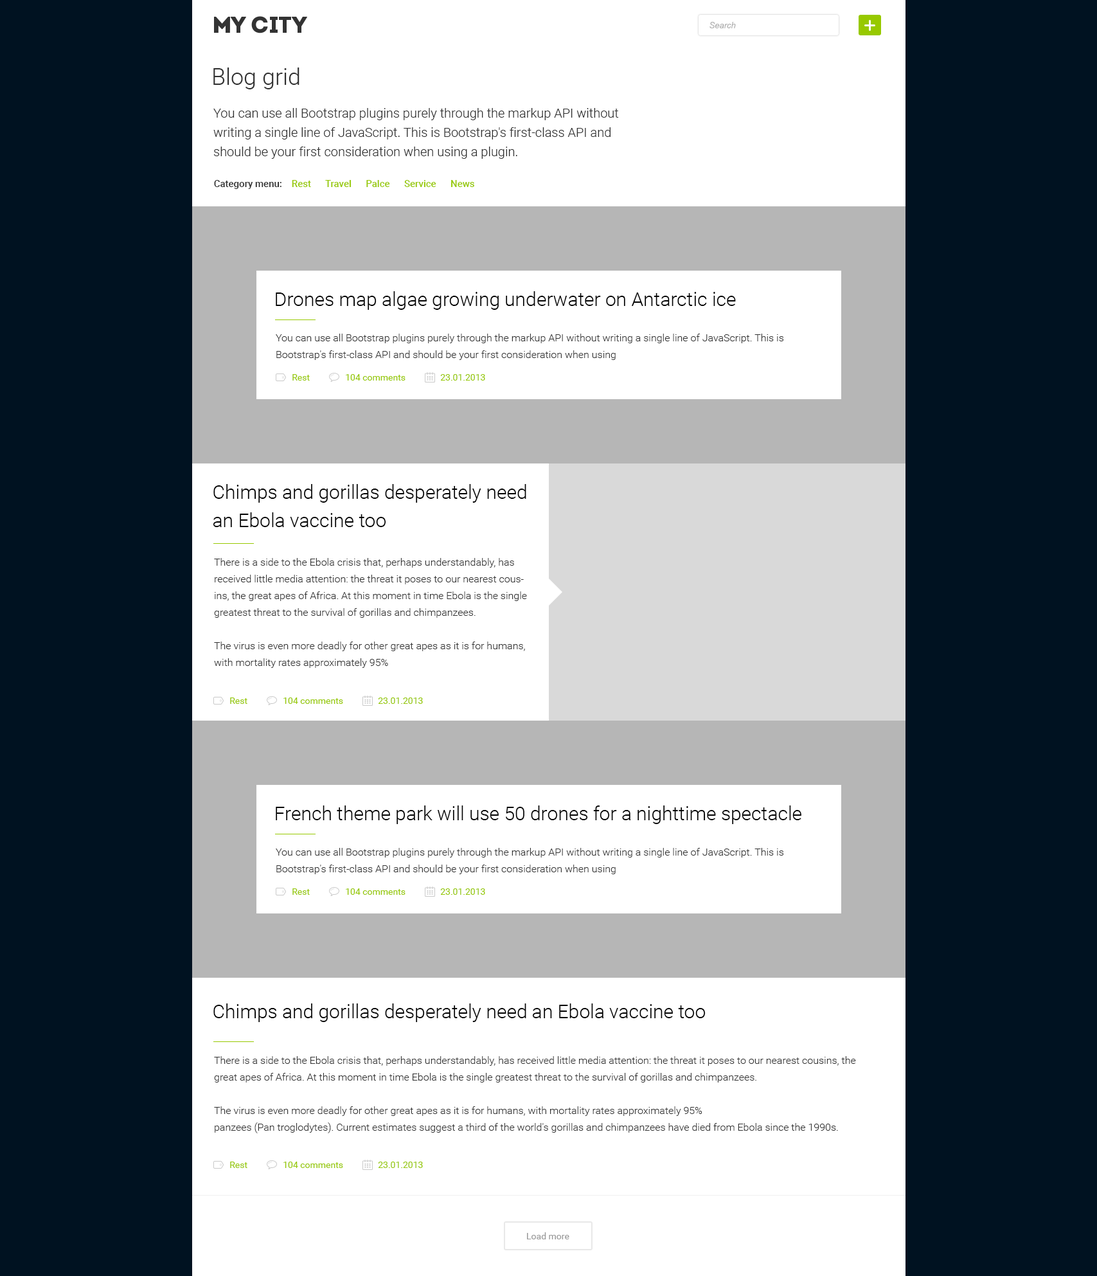
<style>
.page{position:relative;width:1097px;height:1276px;background:#ffffff}
.page>*{position:absolute;margin:0}
.t1{font:8.4px "Arial-ItalicMT";color:#acacac}
.t2{font:23.1px "Roboto-Light";color:#2f2f2f}
.t3{font:12.9px/19.3px "Roboto-Light";color:#2f2f2f}
.t4{font:9.6px "Roboto-Medium";color:#97c900}
.t5{font:9.6px "Roboto-Medium";color:#2f2f2f}
.t6{font:19.3px "Roboto-Light";color:#000000}
.t7{font:10.3px/16.7px "Roboto-Light";color:#333333}
.t8{font:9px "Roboto-Regular";color:#97c900}
.t9{font:19.3px/28.3px "Roboto-Light";color:#000000}
.t10{font:9px "Roboto-Regular";color:#9b9b9b}
</style>
<div class="page">
<p class="t1" style="left:710px;top:22px;width:26px;height:6px">Search</p>
<p class="t2" style="left:213px;top:68px;width:87px;height:21px">Blog grid</p>
<p class="t3" style="left:213px;top:108px;width:406px;height:51px">You can use all Bootstrap plugins purely through the markup API without writing a single line of JavaScript. This is Bootstrap's first-class API and should be your first consideration when using a plugin.</p>
<p class="t4" style="left:214px;top:180px;width:260px;height:9px"><span class="t5">Category menu:    </span>Rest      Travel      Palce      Service      News</p>
<p class="t6" style="left:276px;top:291px;width:460px;height:19px">Drones map algae growing underwater on Antarctic ice</p>
<p class="t7" style="left:276px;top:334px;width:508px;height:26px">You can use all Bootstrap plugins purely through the markup API without writing a single line of JavaScript. This is Bootstrap's first-class API and should be your first consideration when using</p>
<p class="t8" style="left:292px;top:374px;width:18px;height:7px">Rest</p>
<p class="t8" style="left:346px;top:374px;width:60px;height:7px">104 comments</p>
<p class="t8" style="left:440px;top:374px;width:45px;height:7px">23.01.2013</p>
<p class="t9" style="left:213px;top:484px;width:313px;height:43px">Chimps and gorillas desperately need <br>an Ebola vaccine too</p>
<p class="t7" style="left:214px;top:558px;width:313px;height:110px">There is a side to the Ebola crisis that, perhaps understandably, has received little media attention: the threat it poses to our nearest cousins, the great apes of Africa. At this moment in time Ebola is the single greatest threat to the survival of gorillas and chimpanzees.<br><br>The virus is even more deadly for other great apes as it is for humans, with mortality rates approximately 95%<br>panzees (Pan troglodytes). Current estimates suggest a third of the world's gorillas and chimpanzees have died from Ebola since the 1990s.</p>
<p class="t8" style="left:230px;top:698px;width:18px;height:6px">Rest</p>
<p class="t8" style="left:284px;top:698px;width:59px;height:6px">104 comments</p>
<p class="t8" style="left:378px;top:698px;width:45px;height:6px">23.01.2013</p>
<p class="t6" style="left:276px;top:806px;width:526px;height:18px">French theme park will use 50 drones for a nighttime spectacle</p>
<p class="t7" style="left:276px;top:848px;width:508px;height:26px">You can use all Bootstrap plugins purely through the markup API without writing a single line of JavaScript. This is Bootstrap's first-class API and should be your first consideration when using</p>
<p class="t8" style="left:292px;top:888px;width:18px;height:7px">Rest</p>
<p class="t8" style="left:346px;top:888px;width:60px;height:7px">104 comments</p>
<p class="t8" style="left:440px;top:888px;width:45px;height:7px">23.01.2013</p>
<p class="t6" style="left:213px;top:1004px;width:493px;height:18px">Chimps and gorillas desperately need an Ebola vaccine too</p>
<p class="t7" style="left:214px;top:1056px;width:642px;height:77px">There is a side to the Ebola crisis that, perhaps understandably, has received little media attention: the threat it poses to our nearest cousins, the great apes of Africa. At this moment in time Ebola is the single greatest threat to the survival of gorillas and chimpanzees.<br><br>The virus is even more deadly for other great apes as it is for humans, with mortality rates approximately 95%<br>panzees (Pan troglodytes). Current estimates suggest a third of the world's gorillas and chimpanzees have died from Ebola since the 1990s.</p>
<p class="t8" style="left:230px;top:1162px;width:18px;height:6px">Rest</p>
<p class="t8" style="left:284px;top:1162px;width:59px;height:6px">104 comments</p>
<p class="t8" style="left:378px;top:1162px;width:45px;height:6px">23.01.2013</p>
<p class="t10" style="left:527px;top:1232px;width:43px;height:7px">Load more</p>
</div>
